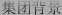
<style>
.page{position:relative;width:62px;height:15px;background:#abacab}
.page>*{position:absolute;margin:0}
.t1{font:15px "SimSun";letter-spacing:0.01em}
</style>
<div class="page">
<p class="t1" style="left:1px;top:0px;width:60px;height:15px">集团背景</p>
</div>
